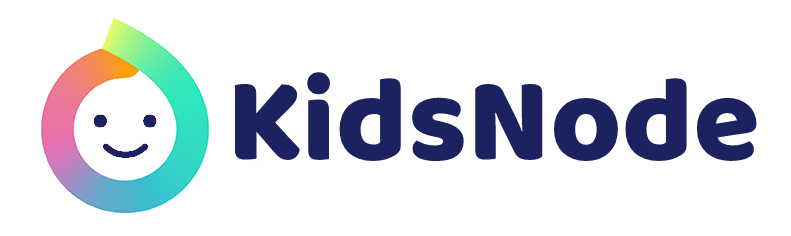
<style>
.page{position:relative;width:791px;height:236px;background:#ffffff}
.page>*{position:absolute;margin:0}
.t1{font:122px "Baloo";color:#1c2260}
</style>
<div class="page">
<p class="t1" style="left:234px;top:72px;width:523px;height:90px">KidsNode</p>
</div>
